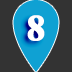
<style>
.page{position:relative;width:72px;height:72px;background:#333333}
.page>*{position:absolute;margin:0}
.t1{font:36px "TimesNewRomanPS-BoldMT";color:#ffffff;font-weight:bold}
</style>
<div class="page">
<p class="t1" style="left:27px;top:15px;width:18px;height:26px">8</p>
</div>
